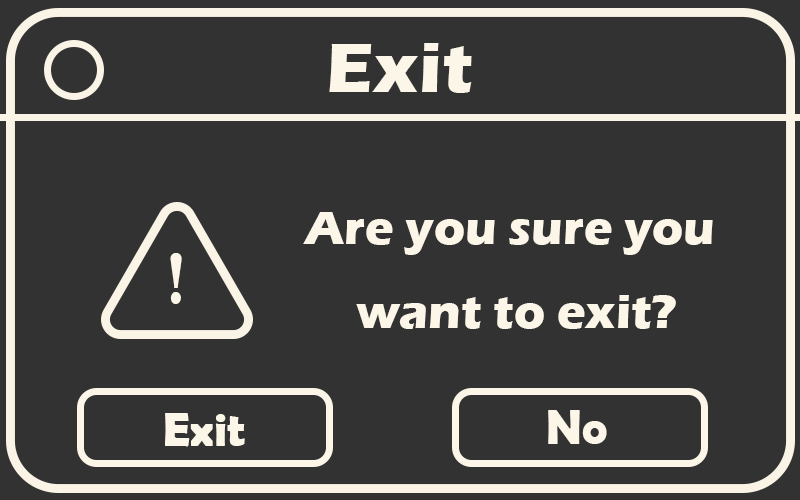
<style>
.page{position:relative;width:800px;height:500px;background:#323232}
.page>*{position:absolute;margin:0}
.t1{font:72px "ErasITC-Bold";color:#fcf6e8}
.t2{font:48px "ErasITC-Bold";color:#fcf6e8}
.t3{font:62.3px "BernardMT-Condensed";color:#fcf6e8}
.t4{font:48px "BerlinSansFBDemi-Bold";color:#fcf6e8}
</style>
<div class="page">
<p class="t1" style="left:329px;top:43px;width:143px;height:50px">Exit</p>
<p class="t2" style="left:303px;top:212px;width:410px;height:117px;text-align:center">Are you sure you <br>want to exit?</p>
<p class="t3" style="left:170px;top:253px;width:12px;height:51px">!</p>
<p class="t4" style="left:165px;top:413px;width:80px;height:34px">Exit</p>
<p class="t4" style="left:548px;top:410px;width:59px;height:34px">No</p>
</div>
